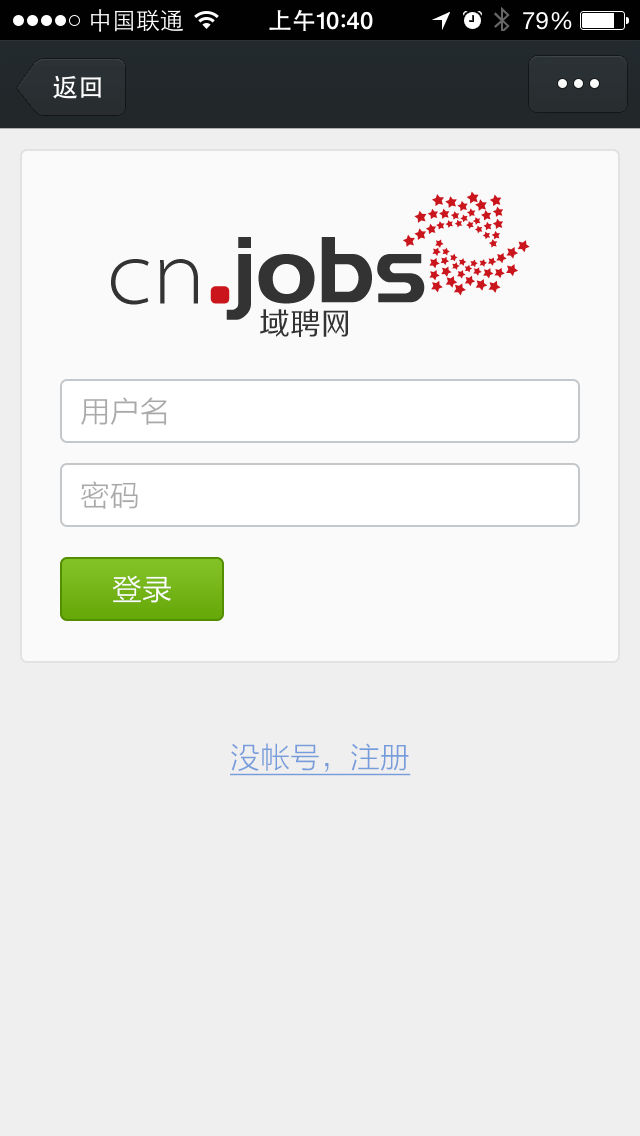
<style>
.page{position:relative;width:640px;height:1136px;background:#efefef}
.page>*{position:absolute;margin:0}
.t1{font:93.3px "Denmark";color:#333333}
.t2{font:90.5px "ZHSRXT--GBK1-0";color:#333333}
.t3{font:93.3px "OCRAStd";color:#ca151d}
.t4{font:30.8px "FZZHJW--GB1-0";color:#333333}
.t5{font:30px "FZLTXHK";color:#a9a9a9}
.t6{font:30px "FZLTXHK";color:#ffffff}
.t7{font:30px "FZLTXHK";color:#769cdc;text-decoration:underline}
</style>
<div class="page">
<p class="t1" style="left:215px;top:237px;width:210px;height:83px">.jobs</p>
<p class="t2" style="left:111px;top:259px;width:87px;height:46px">cn</p>
<p class="t3" style="left:210px;top:286px;width:20px;height:18px">.</p>
<p class="t4" style="left:260px;top:309px;width:88px;height:28px">域聘网</p>
<p class="t5" style="left:81px;top:397px;width:86px;height:28px">用户名</p>
<p class="t5" style="left:81px;top:481px;width:57px;height:28px">密码</p>
<p class="t6" style="left:112px;top:575px;width:59px;height:28px">登录</p>
<p class="t7" style="left:230px;top:743px;width:181px;height:33px">没帐号，注册</p>
</div>
